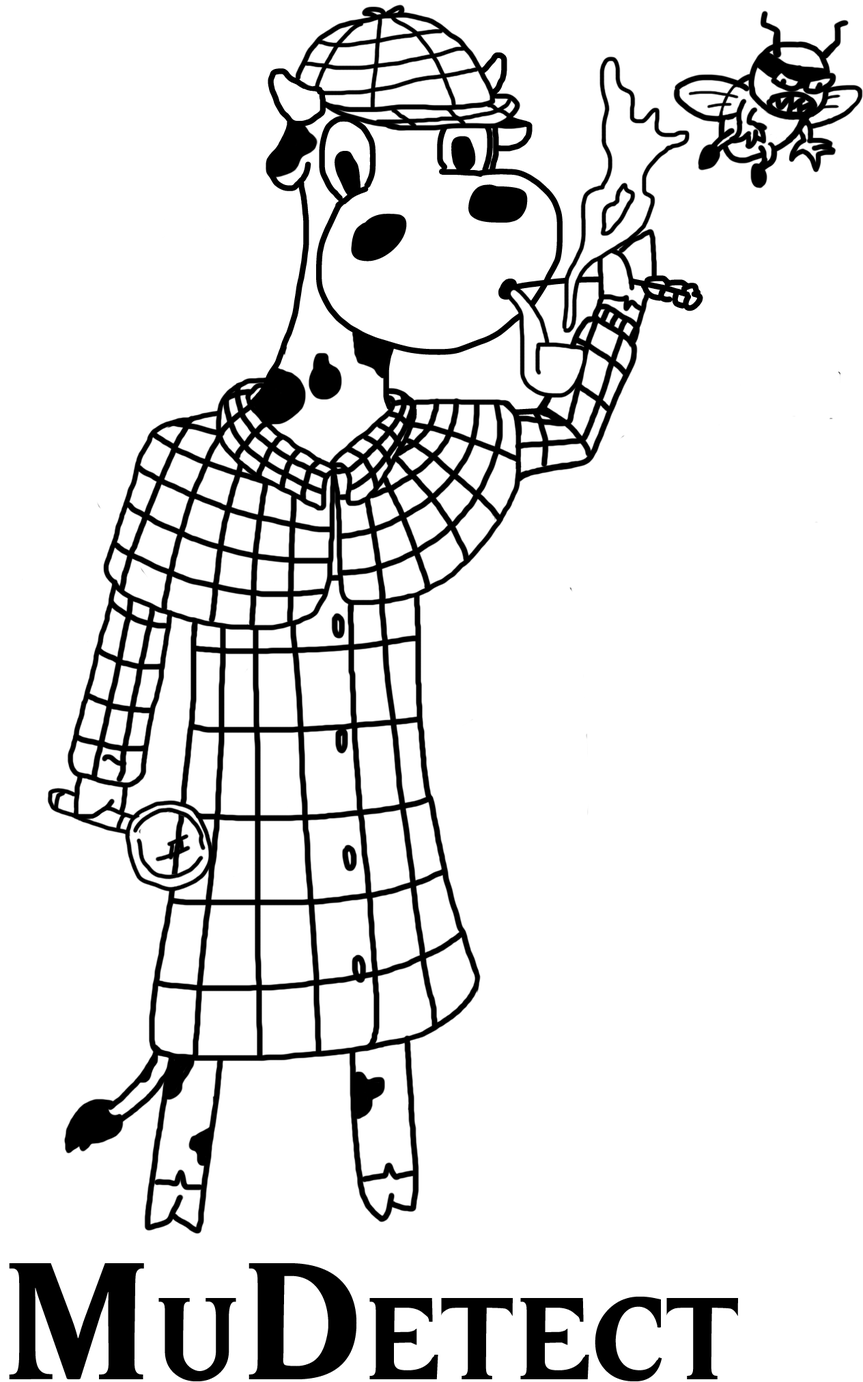
<style>
.page{position:relative;width:863px;height:1382px;background:#ffffff}
.page>*{position:absolute;margin:0}
.t1{font:170.7px "Ghostbusters";color:#000000;font-variant:small-caps}
</style>
<div class="page">
<p class="t1" style="left:9px;top:1263px;width:729px;height:118px">MuDetect</p>
</div>
